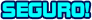
<style>
.page{position:relative;width:92px;height:20px;background:#04feff}
.page>*{position:absolute;margin:0}
.t1{font:22.7px "DFSoGeiStd-W9";letter-spacing:-0.017em;color:#04feff;scale:0.84 1}
</style>
<div class="page">
<p class="t1" style="left:2px;top:2px;width:88px;height:16px">SEGURO!</p>
</div>
